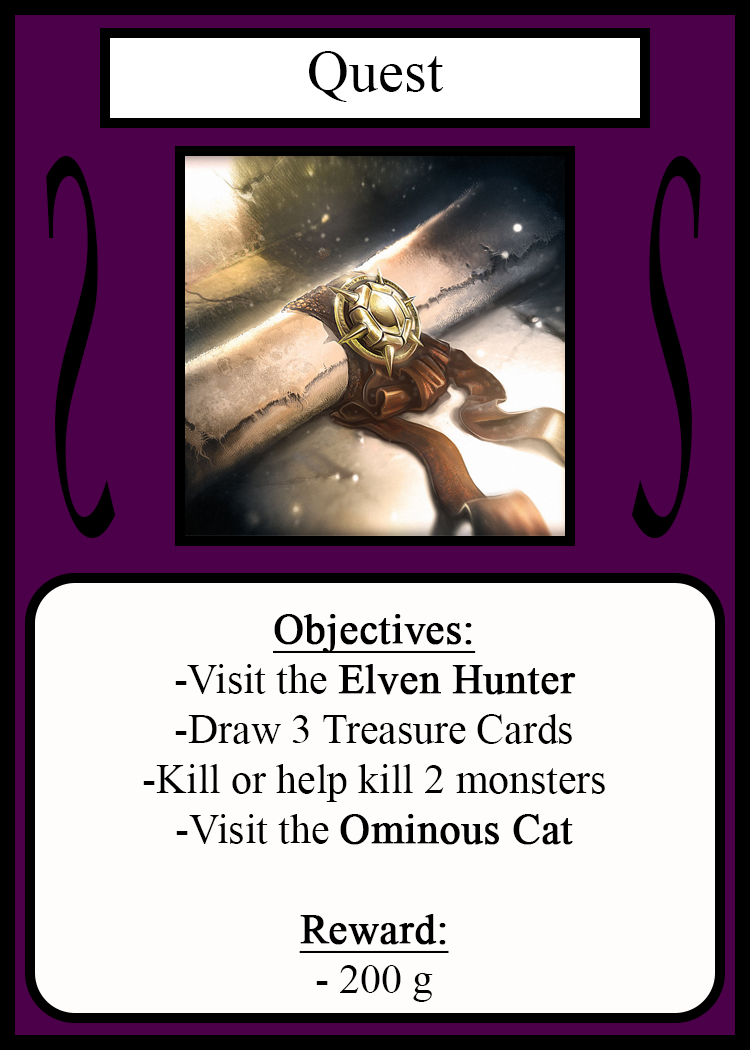
<style>
.page{position:relative;width:750px;height:1050px;background:#fffcfc}
.page>*{position:absolute;margin:0}
.t1{font:58.3px "TimesNewRomanPSMT";color:#010101}
.t2{font:504.3px "LucidaCalligraphy-Italic";color:#000000;scale:0.24 1}
.t3{font:504.1px "LucidaCalligraphy-Italic";color:#000000;scale:0.24 1}
.t4{font:41.7px "TimesNewRomanPSMT";color:#000000}
.t5{font:41.7px "TimesNewRomanPSMT";color:#000000;font-weight:bold;text-decoration:underline}
.t6{font:41.7px "TimesNewRomanPSMT";color:#000000;font-weight:bold}
</style>
<div class="page">
<p class="t1" style="left:309px;top:51px;width:135px;height:51px">Quest</p>
<p class="t2" style="left:46px;top:156px;width:70px;height:382px;rotate:180deg">S</p>
<p class="t3" style="left:631px;top:156px;width:70px;height:382px">S</p>
<p class="t4" style="left:143px;top:614px;width:462px;height:388px;text-align:center"><span class="t5">Objectives:<br></span>-Visit the <span class="t6">Elven Hunter<br></span>-Draw 3 Treasure Cards<br>-Kill or help kill 2 monsters<br>-Visit the <span class="t6">Ominous Cat<br><br></span><span class="t5">Reward:</span><br>- 200 g</p>
</div>
